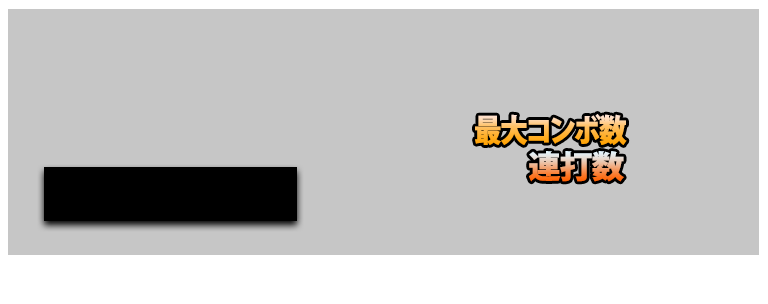
<style>
.page{position:relative;width:768px;height:304px;background:#c6c6c6}
.page>*{position:absolute;margin:0}
.t1{font:31.6px "KozGoPr6N-Heavy";letter-spacing:-0.04em;scale:0.87 1}
.t2{font:31.6px "KozGoPr6N-Heavy";letter-spacing:-0.02em}
</style>
<div class="page">
<p class="t1" style="left:475px;top:114px;width:152px;height:31px">最大コンボ数</p>
<p class="t2" style="left:529px;top:151px;width:95px;height:31px">連打数</p>
</div>
